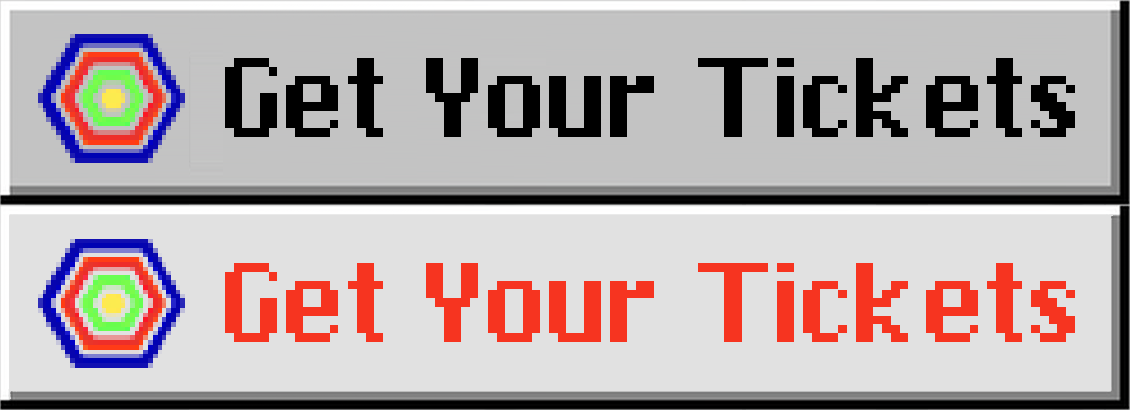
<style>
.page{position:relative;width:1130px;height:410px;background:#e1e1e1}
.page>*{position:absolute;margin:0}
.t1{font:70px "pixChicago";color:#000000}
.t2{font:70px "pixChicago";color:#f63420}
</style>
<div class="page">
<p class="t1" style="left:225px;top:58px;width:850px;height:79px">Get Your Tickets</p>
<p class="t2" style="left:225px;top:263px;width:850px;height:79px">Get Your Tickets</p>
</div>
